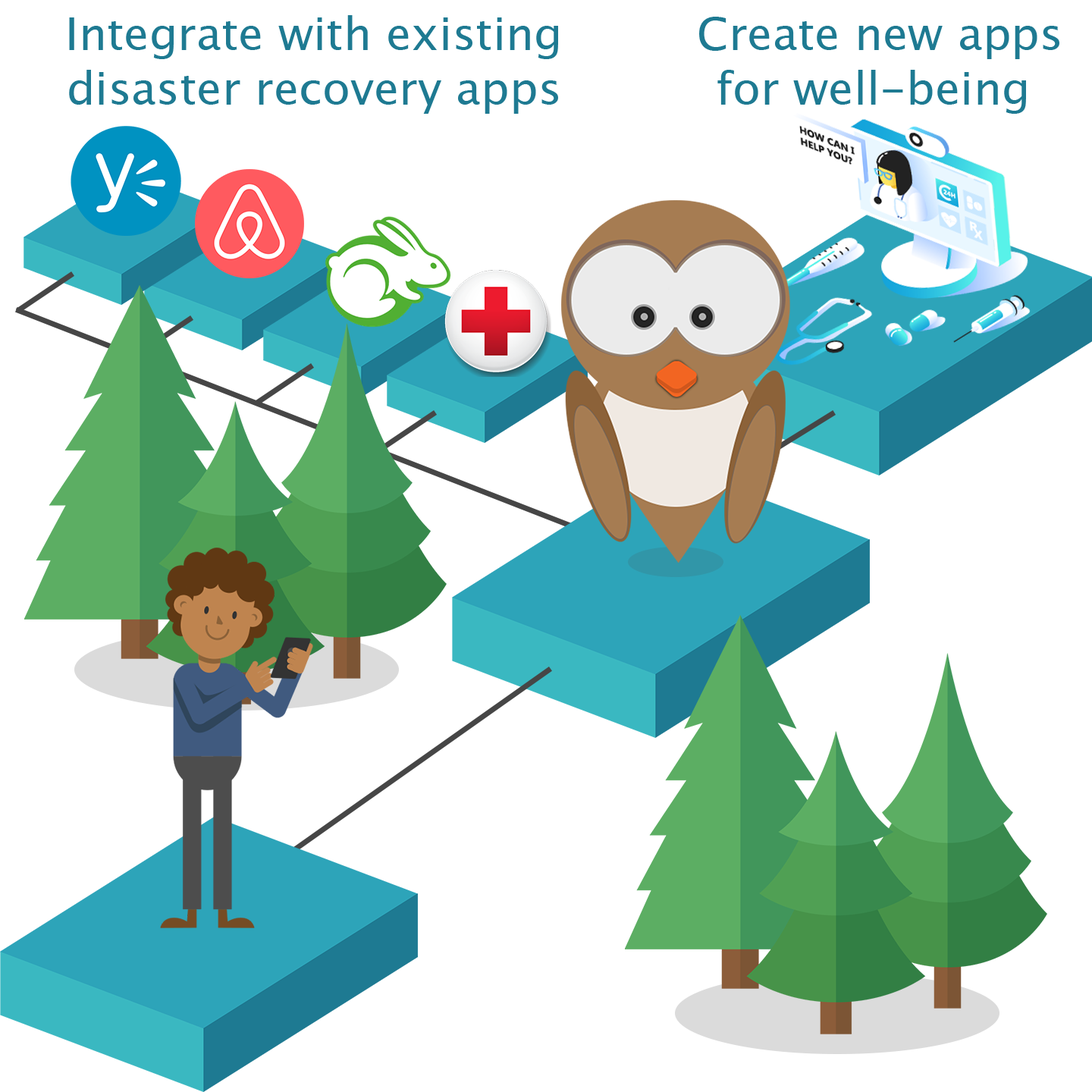
<style>
.page{position:relative;width:1092px;height:1092px;background:#ffffff}
.page>*{position:absolute;margin:0}
.t1{font:45.5px "LucidaSansUnicode";color:#1e7a92}
</style>
<div class="page">
<p class="t1" style="left:69px;top:15px;width:489px;height:99px;text-align:center">Integrate with existing<br>disaster recovery apps</p>
<p class="t1" style="left:699px;top:17px;width:360px;height:97px;text-align:center">Create new apps <br>for well-being</p>
</div>
